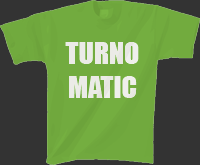
<style>
.page{position:relative;width:200px;height:165px;background:#333333}
.page>*{position:absolute;margin:0}
.t1{font:28px "Impact";color:#ffffff}
</style>
<div class="page">
<p class="t1" style="left:65px;top:42px;width:74px;height:56px;text-align:center">TURNO<br>MATIC</p>
</div>
